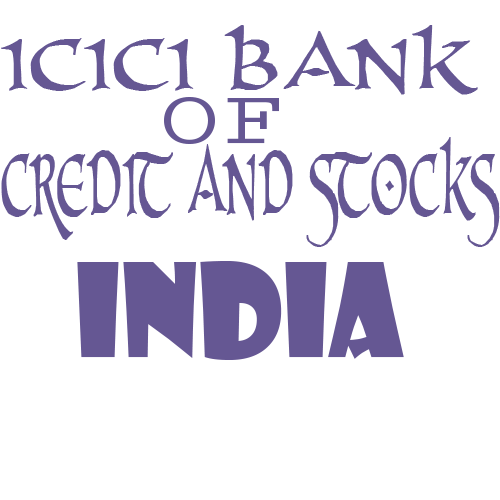
<style>
.page{position:relative;width:500px;height:500px;background:#ffffff}
.page>*{position:absolute;margin:0}
.t1{font:75px "PR-CelticNarrow";color:#655793;scale:1.21 1}
.t2{font:75px "PrestigeEliteStd-Bd";color:#655793;scale:1.44 1}
.t3{font:89.7px "PR-CelticNarrow";color:#655793;scale:0.55 1}
.t4{font:126px "ShowcardGothic-Reg";color:#655793;scale:0.96 1}
</style>
<div class="page">
<p class="t1" style="left:1px;top:25px;width:477px;height:70px">ICICI BANK</p>
<p class="t2" style="left:164px;top:97px;width:115px;height:47px">OF</p>
<p class="t3" style="left:1px;top:137px;width:499px;height:110px">CREDIT AND STOCKS</p>
<p class="t4" style="left:77px;top:261px;width:327px;height:99px">INDIA</p>
</div>
